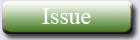
<style>
.page{position:relative;width:140px;height:40px}
.page>*{position:absolute;margin:0}
.t1{font:24px "TimesNewRomanPSMT";color:#ffffff}
</style>
<div class="page">
<p class="t1" style="left:42px;top:8px;width:49px;height:16px">Issue</p>
</div>
